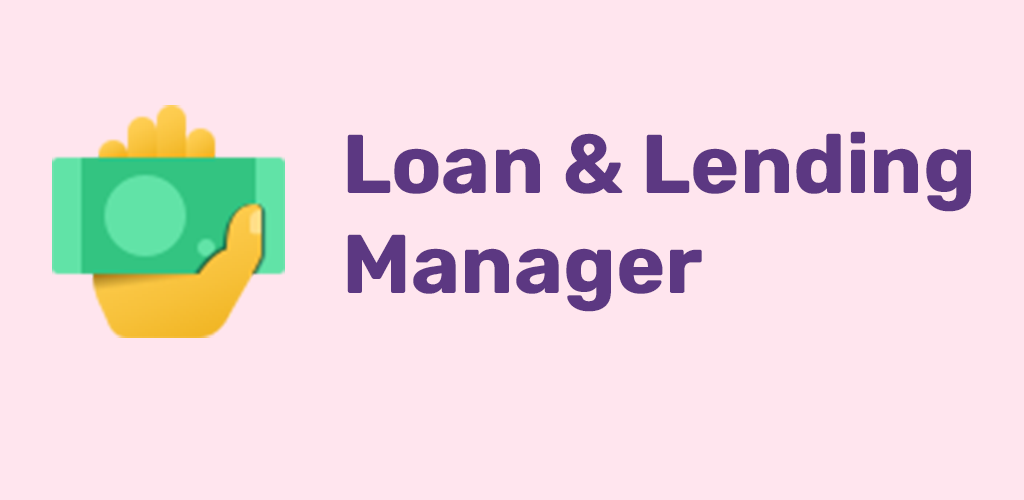
<style>
.page{position:relative;width:1024px;height:500px;background:#ffe5ee}
.page>*{position:absolute;margin:0}
.t1{font:83.3px "RubikRoman-Bold";color:#5c3882}
</style>
<div class="page">
<p class="t1" style="left:347px;top:131px;width:624px;height:181px">Loan &amp; Lending<br>Manager</p>
</div>
